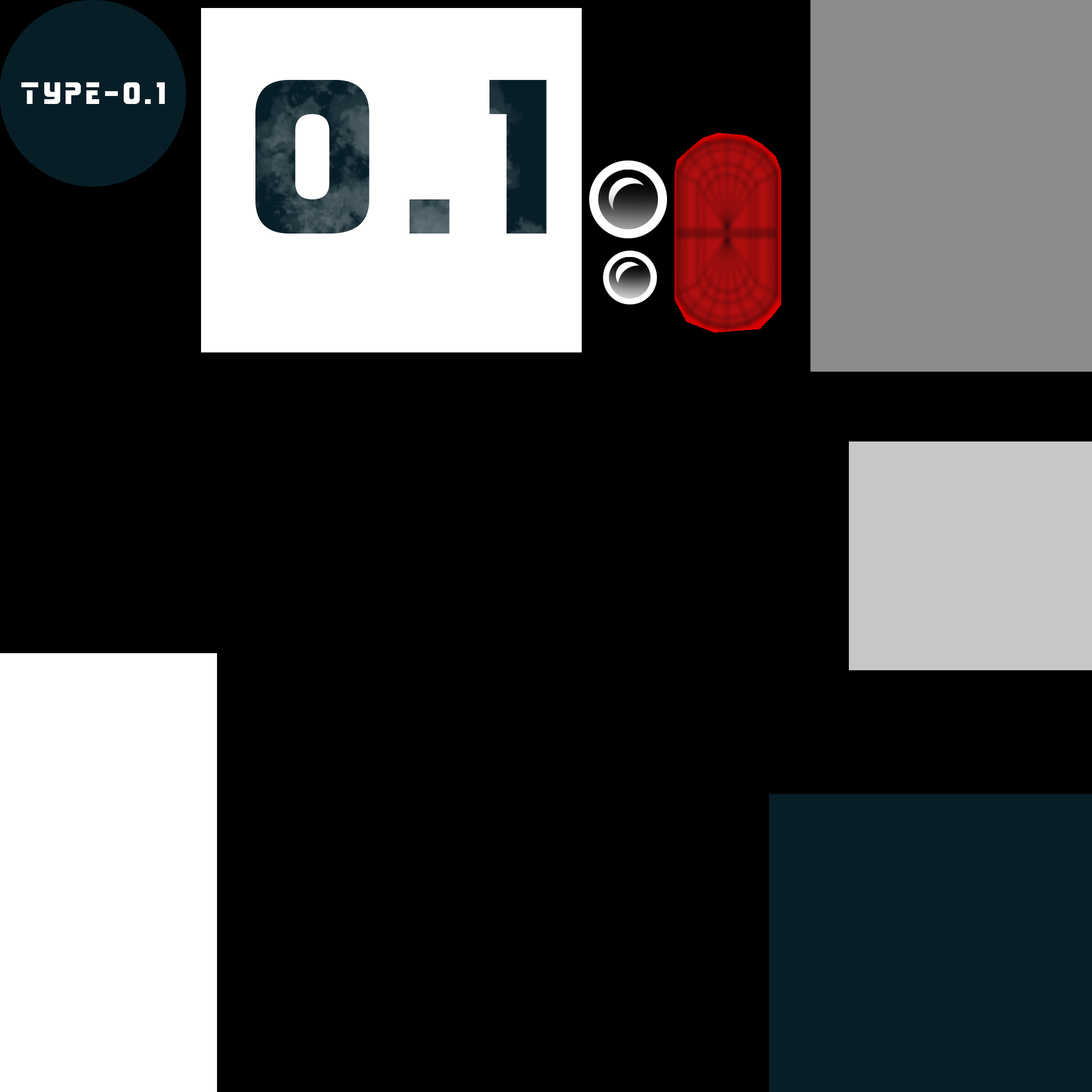
<style>
.page{position:relative;width:1092px;height:1092px;background:#000000}
.page>*{position:absolute;margin:0}
.t1{font:32.9px "Sternbach";letter-spacing:0.05em;color:#ffffff}
</style>
<div class="page">
<p class="t1" style="left:21px;top:82px;width:144px;height:22px">TYPE-0.1</p>
</div>
